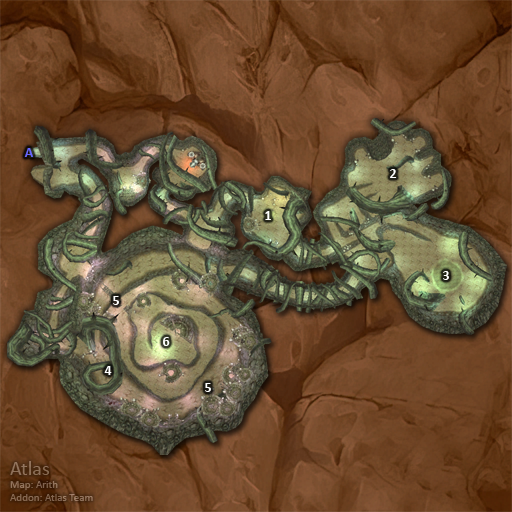
<style>
.page{position:relative;width:512px;height:512px}
.page>*{position:absolute;margin:0}
.t1{font:14px "Calibri-Bold";color:#6666ff}
.t2{font:14px "Calibri-Bold";color:#ffffff}
</style>
<div class="page">
<p class="t1" style="left:24px;top:148px;width:9px;height:9px">A</p>
<p class="t2" style="left:390px;top:169px;width:7px;height:9px">2</p>
<p class="t2" style="left:265px;top:211px;width:6px;height:9px">1</p>
<p class="t2" style="left:443px;top:271px;width:6px;height:9px">3</p>
<p class="t2" style="left:113px;top:296px;width:6px;height:9px">5</p>
<p class="t2" style="left:163px;top:337px;width:7px;height:9px">6</p>
<p class="t2" style="left:104px;top:366px;width:8px;height:9px">4</p>
<p class="t2" style="left:205px;top:383px;width:6px;height:9px">5</p>
</div>
